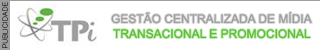
<style>
.page{position:relative;width:320px;height:50px;background:#ffffff}
.page>*{position:absolute;margin:0}
.t1{font:7px "ArialMT"}
.t2{font:12px "ArialMT";color:#9e9e9e}
.t3{font:12px "ArialMT";color:#5abf33}
</style>
<div class="page">
<p class="t1" style="left:2px;top:2px;width:6px;height:46px;rotate:-90deg">PUBLICIDADE</p>
<p class="t2" style="left:111px;top:12px;width:201px;height:12px">GESTÃO CENTRALIZADA DE MÍDIA</p>
<p class="t3" style="left:113px;top:29px;width:198px;height:10px">TRANSACIONAL E PROMOCIONAL</p>
</div>
